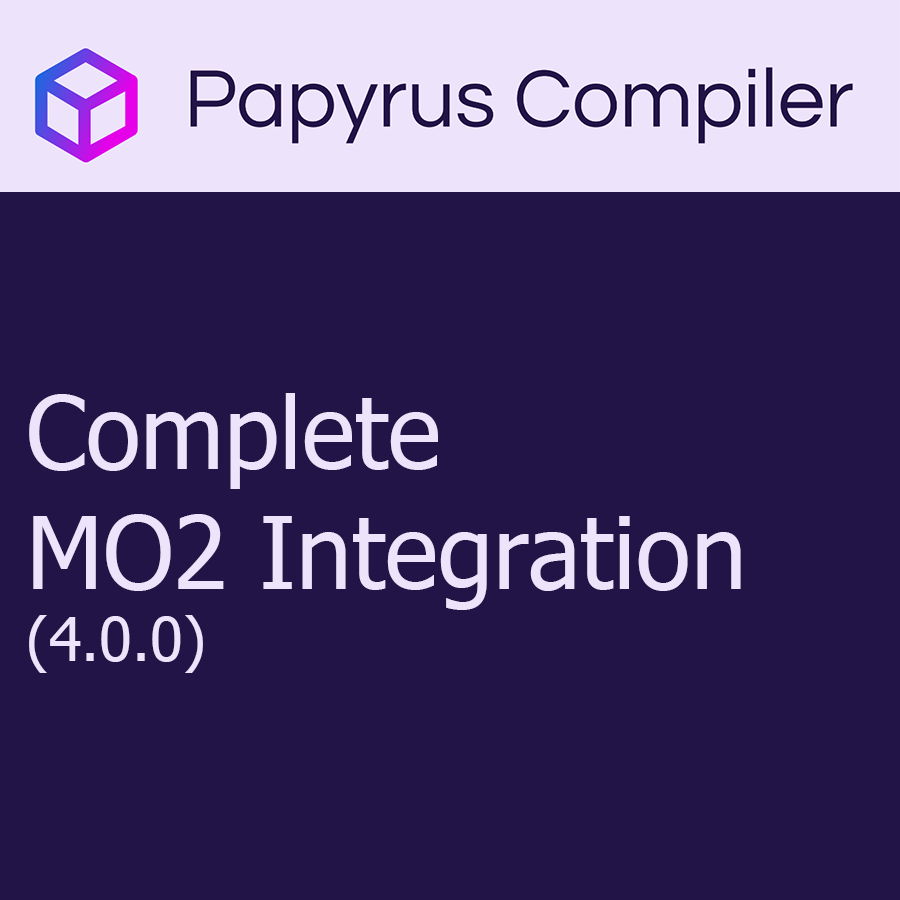
<style>
.page{position:relative;width:900px;height:900px;background:#221447}
.page>*{position:absolute;margin:0}
.t1{font:100px "Tahoma";color:#ede3fb}
.t2{font:60px "Tahoma";color:#ede3fb}
</style>
<div class="page">
<p class="t1" style="left:29px;top:393px;width:712px;height:280px">Complete<br>MO2 Integration<br><span class="t2">(4.0.0)</span></p>
</div>
